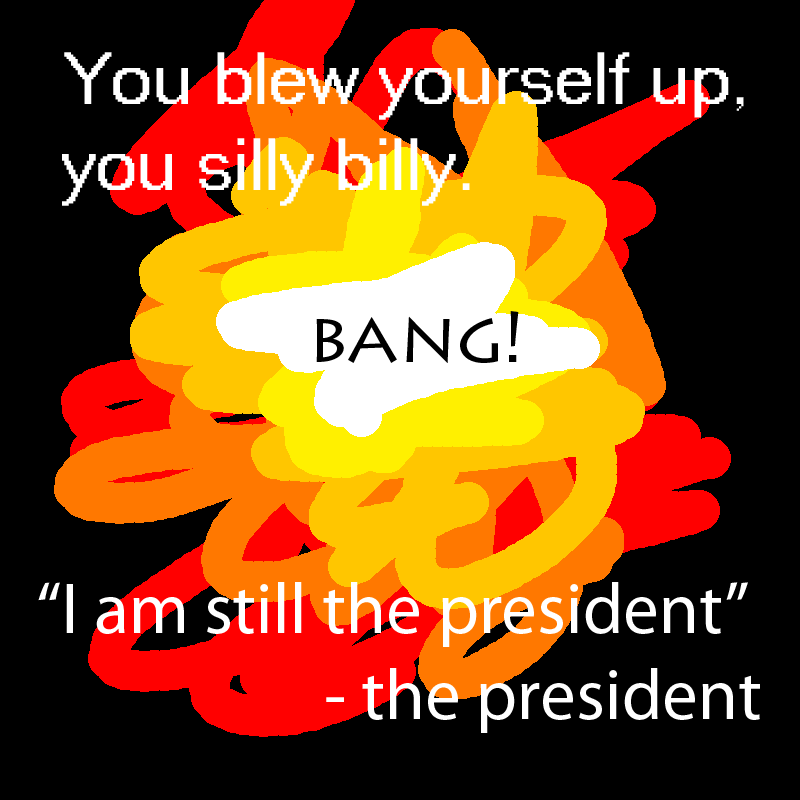
<style>
.page{position:relative;width:800px;height:800px;background:#000000}
.page>*{position:absolute;margin:0}
.t1{font:72px "MS Sans Serif";color:#ffffff}
.t2{font:72px "LithosPro-Regular";color:#000000}
.t3{font:72px "MyriadPro-Regular";color:#ffffff}
</style>
<div class="page">
<p class="t1" style="left:62px;top:52px;width:682px;height:154px">You blew yourself up,<br>you silly billy.</p>
<p class="t2" style="left:316px;top:311px;width:203px;height:52px">bang!</p>
<p class="t3" style="left:38px;top:582px;width:722px;height:151px">“I am still the president”<br>        - the president</p>
</div>
